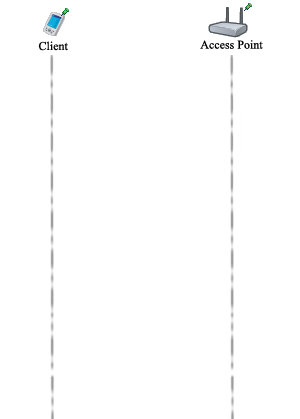
<style>
.page{position:relative;width:300px;height:419px;background:#ffffff}
.page>*{position:absolute;margin:0}
.t1{font:12px "TimesNewRomanPSMT";color:#000000}
</style>
<div class="page">
<p class="t1" style="left:38px;top:41px;width:30px;height:10px">Client</p>
<p class="t1" style="left:200px;top:40px;width:63px;height:9px">Access Point</p>
</div>
